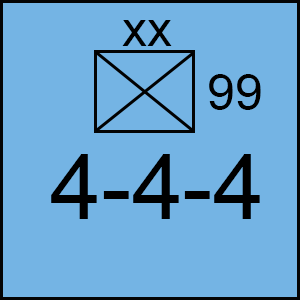
<style>
.page{position:relative;width:300px;height:300px;background:#74b4e4}
.page>*{position:absolute;margin:0}
.t1{font:50px "ArialMT";color:#000000}
.t2{font:91.7px "ArialMT";color:#000000}
</style>
<div class="page">
<p class="t1" style="left:122px;top:20px;width:50px;height:26px">xx</p>
<p class="t1" style="left:209px;top:74px;width:52px;height:36px">99</p>
<p class="t2" style="left:51px;top:154px;width:209px;height:65px">4-4-4</p>
</div>
